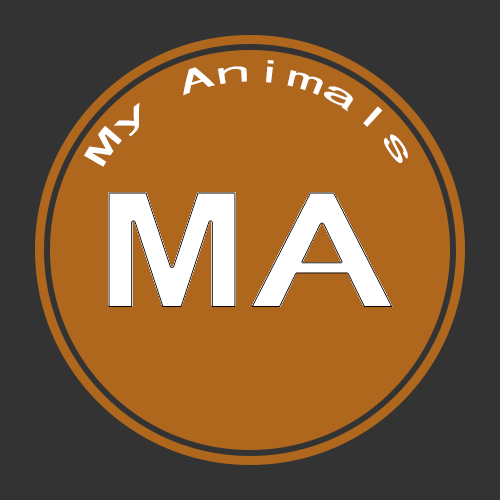
<style>
.page{position:relative;width:500px;height:500px;background:#af671d}
.page>*{position:absolute;margin:0}
.t1{font:29.2px "MS-Gothic";color:#ffffff;scale:2 1}
.t2{font:150px "MS-Gothic";color:#ffffff;scale:2 1}
</style>
<div class="page">
<p class="t1" style="left:84px;top:60px;width:324px;height:107px;text-align:center">My Animals</p>
<p class="t2" style="left:108px;top:192px;width:285px;height:115px">MA</p>
</div>
